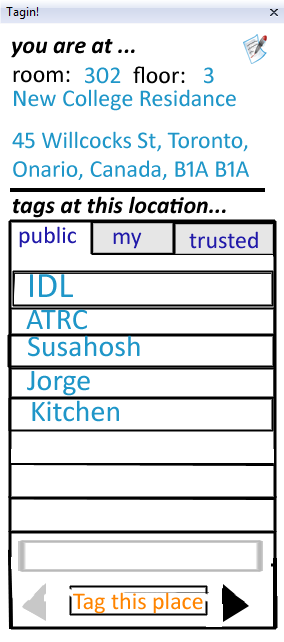
<style>
.page{position:relative;width:284px;height:642px;background:#ffffff}
.page>*{position:absolute;margin:0}
.t1{font:24px "Calibri-BoldItalic";color:#000000}
.t2{font:24px "Calibri";color:#000000}
.t3{font:24px "Calibri";color:#1f96c8}
.t4{font:24px "Calibri";color:#2019a9}
.t5{font:36px "Calibri";color:#1f96c8}
.t6{font:30px "Calibri";color:#1f96c8}
.t7{font:24px "Calibri";color:#ff8400}
</style>
<div class="page">
<p class="t1" style="left:11px;top:39px;width:124px;height:19px">you are at ...</p>
<p class="t2" style="left:13px;top:70px;width:57px;height:13px">room:</p>
<p class="t3" style="left:85px;top:67px;width:36px;height:17px">302</p>
<p class="t2" style="left:133px;top:66px;width:52px;height:18px">floor:</p>
<p class="t3" style="left:204px;top:67px;width:10px;height:17px">3</p>
<p class="t3" style="left:14px;top:89px;width:222px;height:22px">New College Residance</p>
<p class="t3" style="left:12px;top:131px;width:237px;height:49px">45 Willcocks St, Toronto,<br>Onario, Canada, B1A B1A</p>
<p class="t1" style="left:13px;top:196px;width:213px;height:22px">tags at this location...</p>
<p class="t4" style="left:19px;top:226px;width:57px;height:22px">public</p>
<p class="t4" style="left:113px;top:232px;width:29px;height:17px">my</p>
<p class="t4" style="left:189px;top:231px;width:69px;height:18px">trusted</p>
<p class="t5" style="left:30px;top:274px;width:43px;height:23px">IDL</p>
<p class="t6" style="left:26px;top:309px;width:61px;height:21px">ATRC</p>
<p class="t6" style="left:28px;top:335px;width:112px;height:22px">Susahosh</p>
<p class="t6" style="left:27px;top:371px;width:63px;height:25px">Jorge</p>
<p class="t6" style="left:32px;top:400px;width:87px;height:22px">Kitchen</p>
<p class="t7" style="left:73px;top:592px;width:130px;height:22px">Tag this place</p>
</div>
